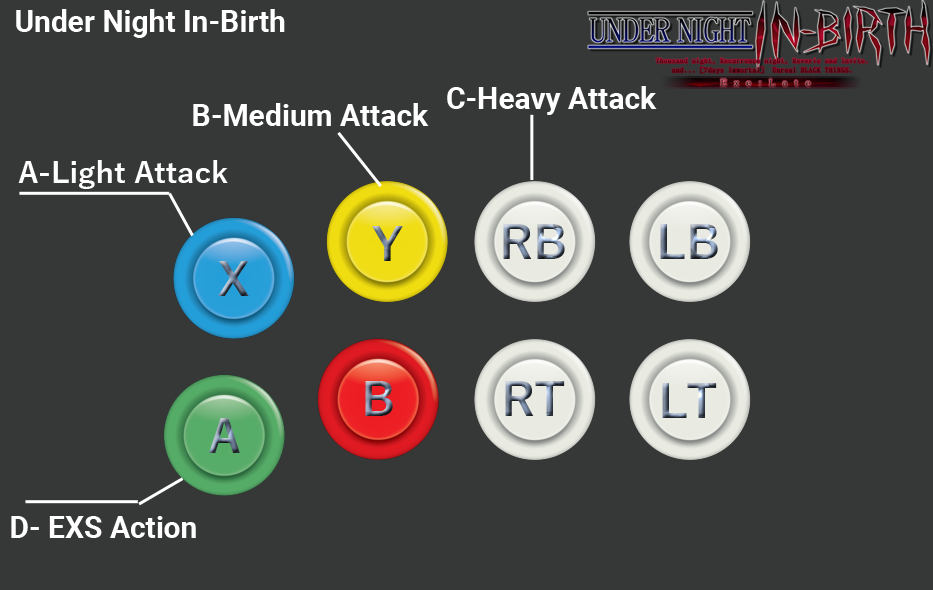
<style>
.page{position:relative;width:933px;height:590px;background:#363838}
.page>*{position:absolute;margin:0}
.t1{font:30px "Roboto-Bold";color:#ffffff}
.t2{font:30px "YuGothic-Bold";color:#ffffff}
</style>
<div class="page">
<p class="t1" style="left:16px;top:9px;width:269px;height:29px">Under Night In-Birth</p>
<p class="t1" style="left:447px;top:86px;width:210px;height:29px">C-Heavy Attack</p>
<p class="t1" style="left:193px;top:103px;width:236px;height:23px">B-Medium Attack</p>
<p class="t2" style="left:18px;top:160px;width:210px;height:29px">A-Light Attack</p>
<p class="t1" style="left:11px;top:516px;width:185px;height:22px">D- EXS Action</p>
</div>
